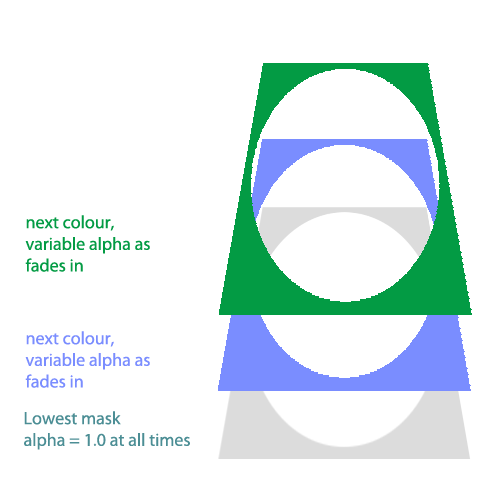
<style>
.page{position:relative;width:500px;height:500px;background:#ffffff}
.page>*{position:absolute;margin:0}
.t1{font:18px "MyriadPro-Regular";color:#039b44}
.t2{font:18px "MyriadPro-Regular";color:#7a8dff}
.t3{font:18px "MyriadPro-Regular";color:#4c8e95}
</style>
<div class="page">
<p class="t1" style="left:25px;top:215px;width:125px;height:57px">next colour, <br>variable alpha as <br>fades in</p>
<p class="t2" style="left:25px;top:331px;width:125px;height:57px">next colour, <br>variable alpha as <br>fades in</p>
<p class="t3" style="left:24px;top:411px;width:166px;height:39px">Lowest mask<br>alpha = 1.0 at all times</p>
</div>
